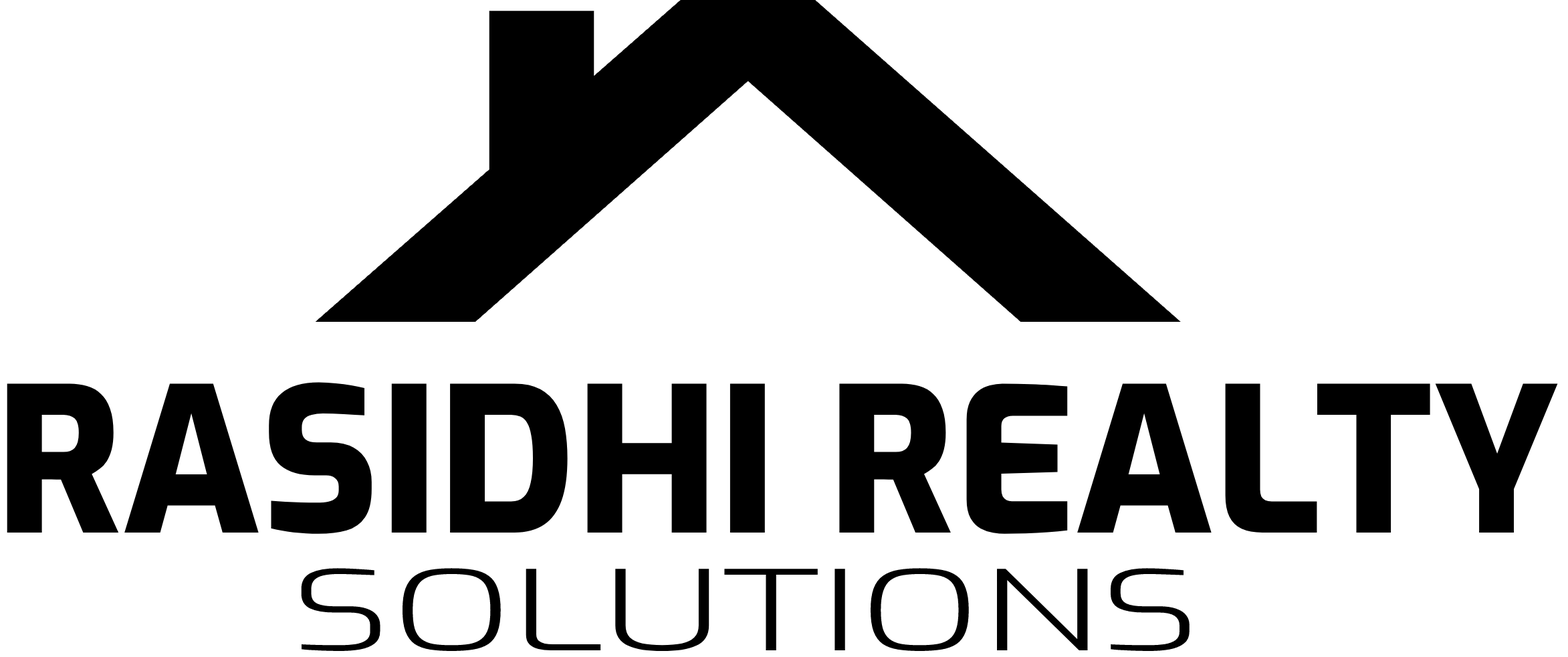
<style>
.page{position:relative;width:1568px;height:657px;background:#ffffff}
.page>*{position:absolute;margin:0}
.t1{font:200.6px "Exo-ExtraBold";color:#000000;text-transform:uppercase}
.t2{font:110.8px "Exo-Light";color:#000000;text-transform:uppercase;scale:1.59 1}
</style>
<div class="page">
<p class="t1" style="left:7px;top:382px;width:1551px;height:152px">Rasidhi realty</p>
<p class="t2" style="left:301px;top:568px;width:889px;height:83px">solutions</p>
</div>
